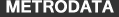
<style>
.page{position:relative;width:119px;height:17px;background:#333333}
.page>*{position:absolute;margin:0}
.t1{font:18px "Gautami-Bold";letter-spacing:-0.01em;color:#fefefe;text-transform:uppercase;font-weight:bold}
</style>
<div class="page">
<p class="t1" style="left:6px;top:0px;width:108px;height:13px">Metrodata</p>
</div>
